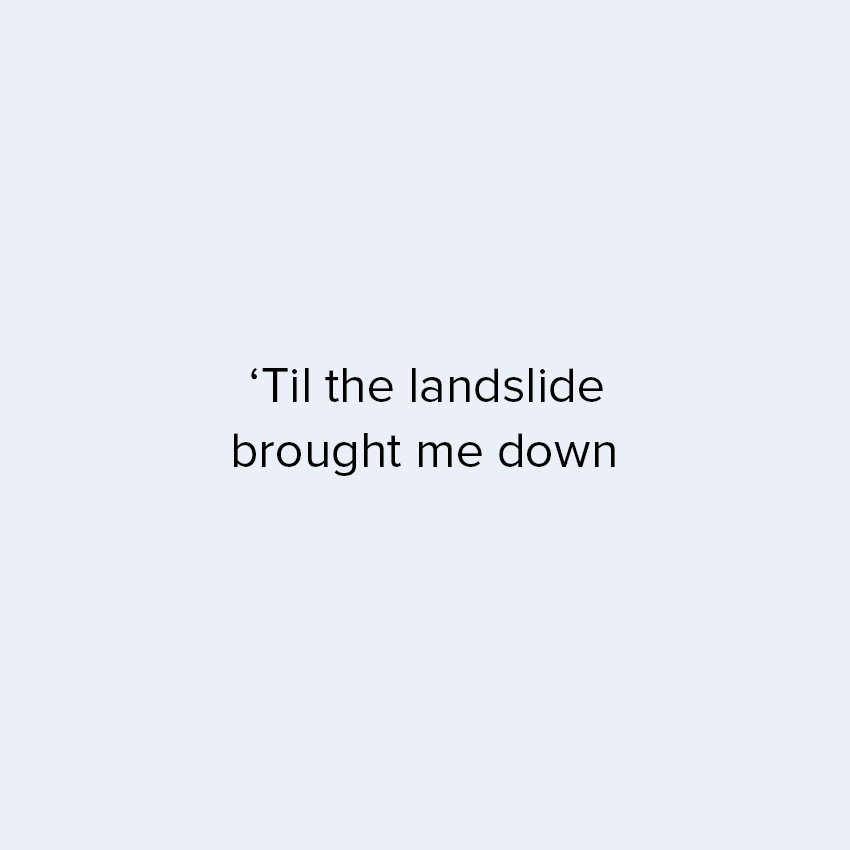
<style>
.page{position:relative;width:850px;height:850px;background:#ebf0f8}
.page>*{position:absolute;margin:0}
.t1{font:12px "ProximaNova-Regular";color:#000000}
</style>
<div class="page">
<p class="t1" style="left:251px;top:368px;width:352px;height:34px;text-align:center">‘Til the landslide</p>
<p class="t1" style="left:234px;top:433px;width:381px;height:43px;text-align:center">brought me down</p>
</div>
